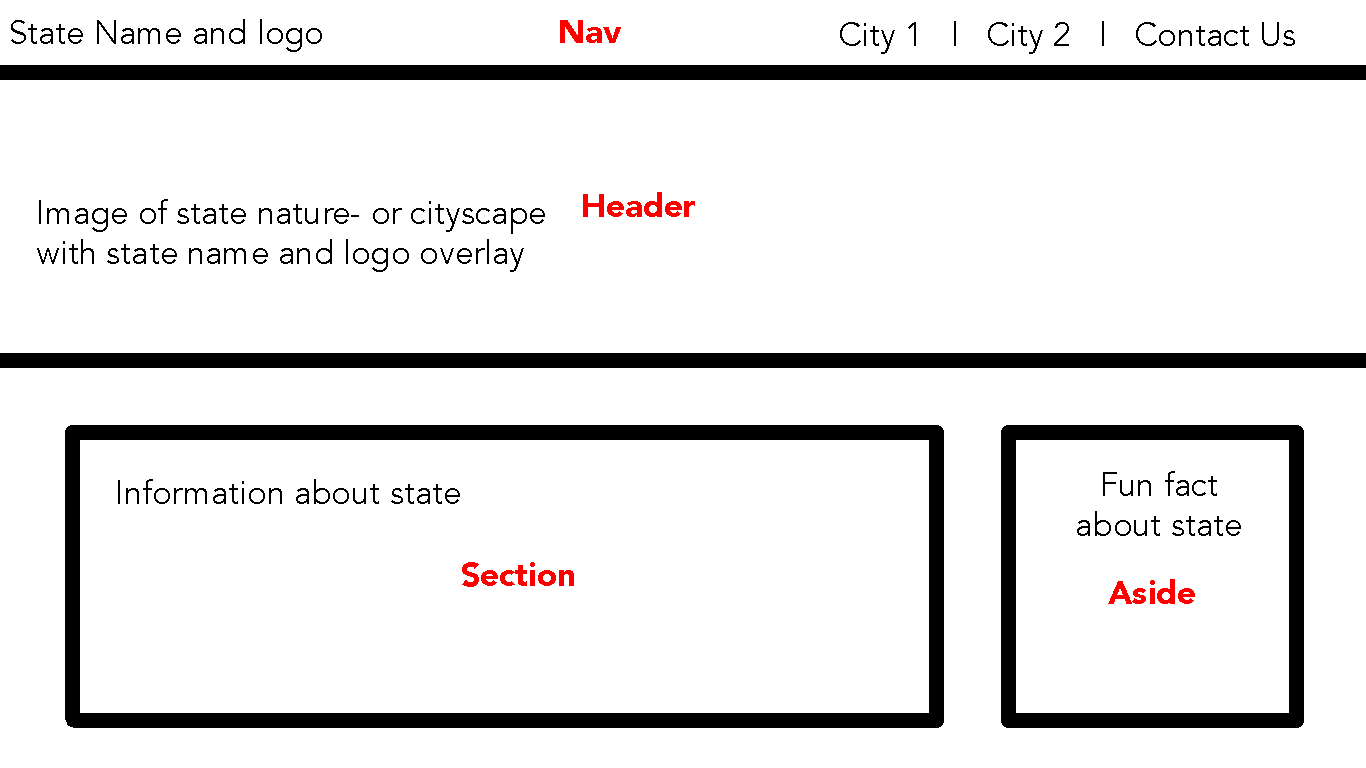
<style>
.page{position:relative;width:1366px;height:768px;background:#ffffff}
.page>*{position:absolute;margin:0}
.t1{font:33px "Avenir-Book";color:#000000}
.t2{font:33px "Avenir-Black";color:#ff0000}
</style>
<div class="page">
<p class="t1" style="left:11px;top:19px;width:311px;height:33px">State Name and logo</p>
<p class="t2" style="left:560px;top:20px;width:61px;height:23px">Nav</p>
<p class="t1" style="left:840px;top:21px;width:455px;height:33px">City 1   |   City 2   |   Contact Us</p>
<p class="t2" style="left:583px;top:192px;width:112px;height:25px">Header</p>
<p class="t1" style="left:37px;top:199px;width:508px;height:73px">Image of state nature- or cityscape<br>with state name and logo overlay</p>
<p class="t1" style="left:1077px;top:471px;width:164px;height:65px;text-align:center">Fun fact<br>about state</p>
<p class="t1" style="left:118px;top:479px;width:342px;height:25px">Information about state</p>
<p class="t2" style="left:462px;top:562px;width:112px;height:25px">Section</p>
<p class="t2" style="left:1108px;top:579px;width:87px;height:25px">Aside</p>
</div>
